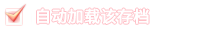
<style>
.page{position:relative;width:218px;height:30px;background:#ffffff}
.page>*{position:absolute;margin:0}
.t1{font:16px "SourceHanSansSC-Regular";color:#ffffff;font-weight:bold}
</style>
<div class="page">
<p class="t1" style="left:37px;top:8px;width:112px;height:16px">自动加载该存档</p>
</div>
